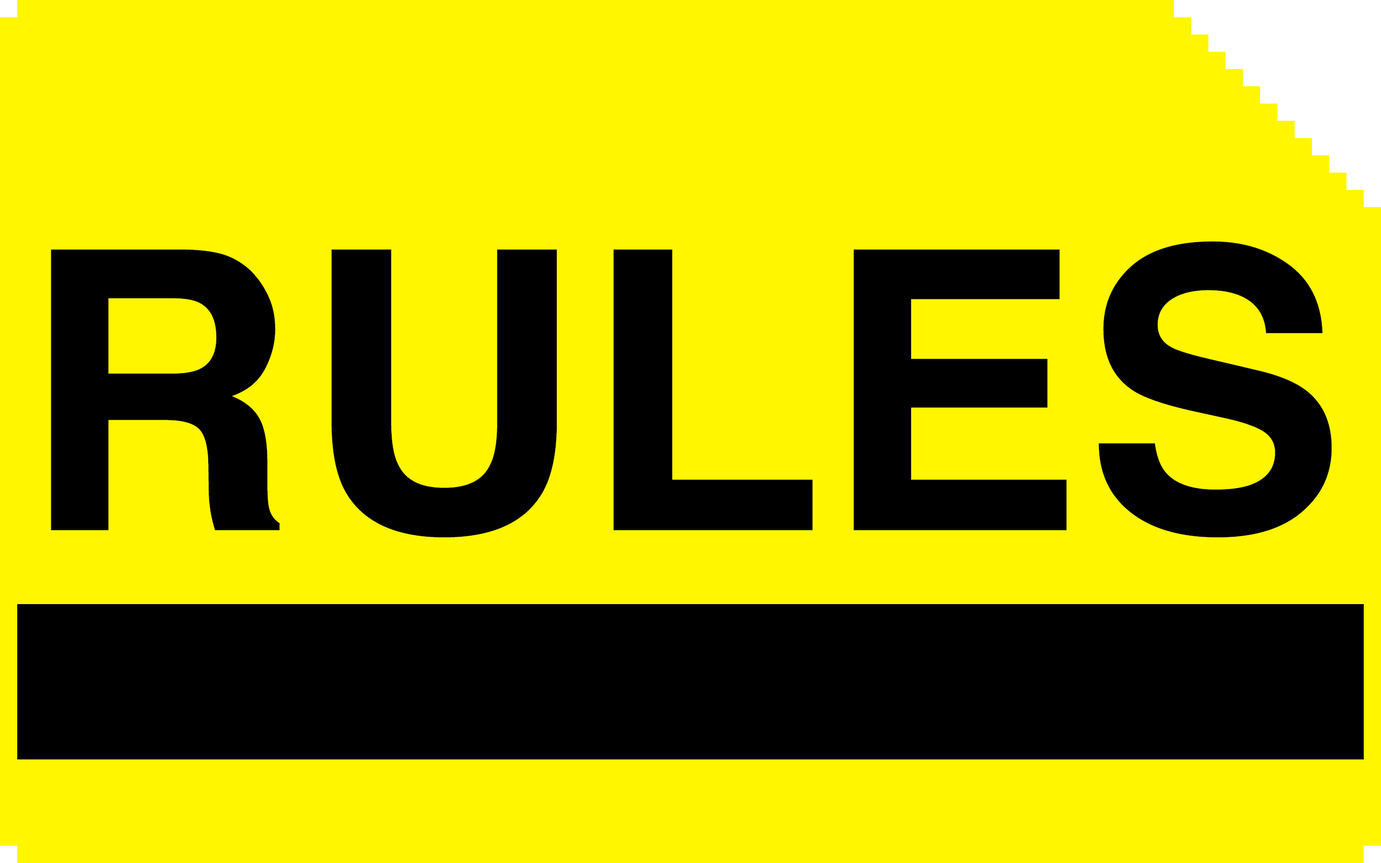
<style>
.page{position:relative;width:1381px;height:863px;background:#fff600}
.page>*{position:absolute;margin:0}
.t1{font:389.9px "Helvetica-Bold";letter-spacing:0.001em;color:#000000}
</style>
<div class="page">
<p class="t1" style="left:51px;top:241px;width:1281px;height:297px">RULES</p>
</div>
